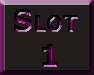
<style>
.page{position:relative;width:94px;height:75px;background:#201e1a}
.page>*{position:absolute;margin:0}
.t1{font:30px "Tahoma-Bold";font-variant:small-caps;font-weight:bold}
</style>
<div class="page">
<p class="t1" style="left:14px;top:9px;width:64px;height:58px;text-align:center">Slot <br>1</p>
</div>
